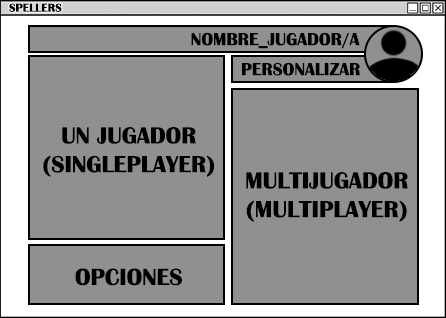
<style>
.page{position:relative;width:446px;height:318px;background:#8f918f}
.page>*{position:absolute;margin:0}
.t1{font:12px "BritannicBold";color:#000000}
.t2{font:18px "BritannicBold";color:#000000}
.t3{font:24px "BritannicBold";color:#000000}
</style>
<div class="page">
<p class="t1" style="left:9px;top:3px;width:53px;height:9px">SPELLERS</p>
<p class="t2" style="left:191px;top:32px;width:169px;height:17px">NOMBRE_JUGADOR/A</p>
<p class="t2" style="left:242px;top:62px;width:119px;height:14px">PERSONALIZAR</p>
<p class="t3" style="left:43px;top:127px;width:172px;height:50px;text-align:center">UN JUGADOR<br>(SINGLEPLAYER)</p>
<p class="t3" style="left:246px;top:172px;width:162px;height:50px;text-align:center">MULTIJUGADOR<br>(MULTIPLAYER)</p>
<p class="t3" style="left:75px;top:268px;width:107px;height:18px">OPCIONES</p>
</div>
